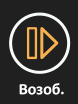
<style>
.page{position:relative;width:78px;height:104px;background:#202020}
.page>*{position:absolute;margin:0}
.t1{font:12px "Calibri-Bold";color:#ffffff}
</style>
<div class="page">
<p class="t1" style="left:19px;top:83px;width:45px;height:12px">Возоб.</p>
</div>
